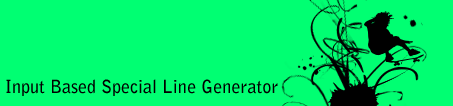
<style>
.page{position:relative;width:453px;height:106px;background:#00ff72}
.page>*{position:absolute;margin:0}
.t1{font:18px "BellGothicStd-Bold";color:#000000}
</style>
<div class="page">
<p class="t1" style="left:6px;top:79px;width:272px;height:17px">Input Based Special Line Generator</p>
</div>
